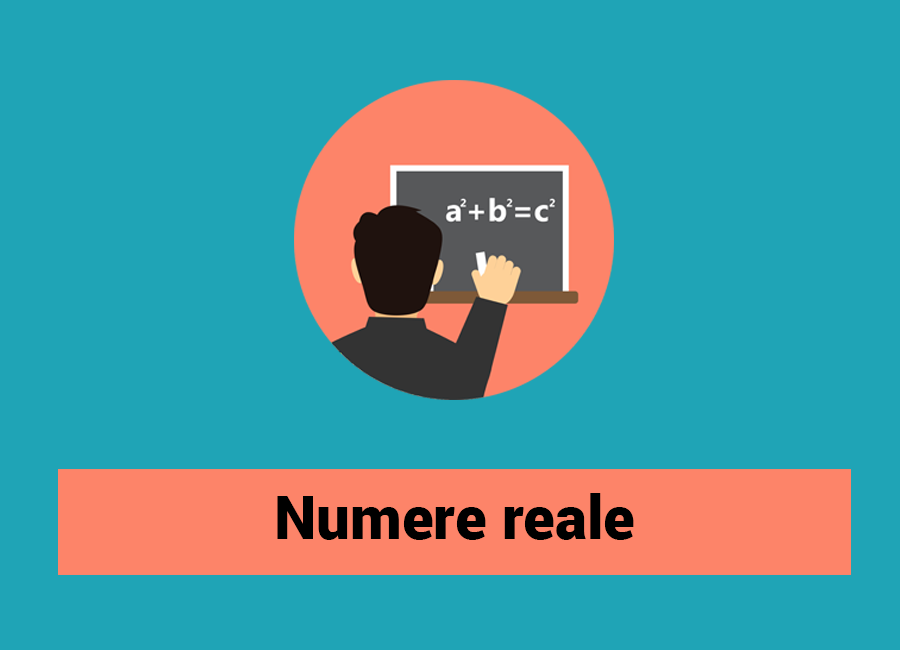
<style>
.page{position:relative;width:900px;height:650px;background:#1fa4b6}
.page>*{position:absolute;margin:0}
.t1{font:60px "Roboto-Black";color:#000000}
</style>
<div class="page">
<p class="t1" style="left:277px;top:493px;width:357px;height:47px">Numere reale</p>
</div>
